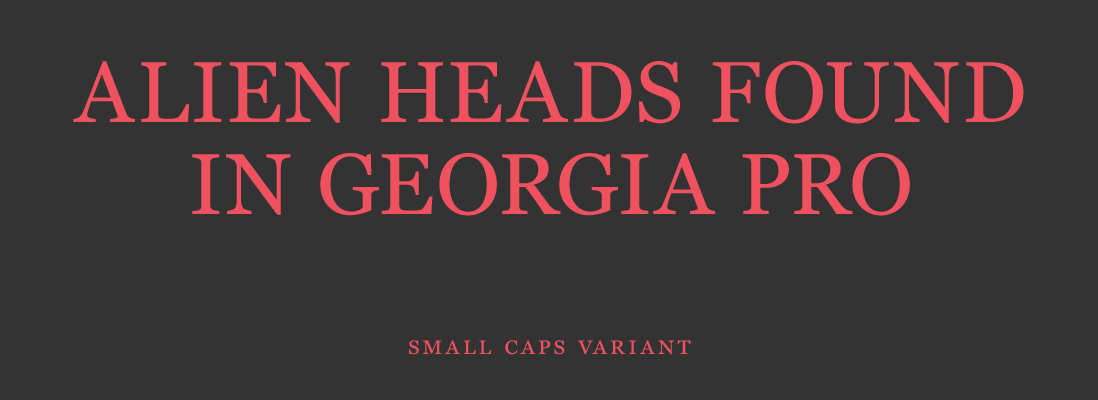
<style>
.page{position:relative;width:1098px;height:400px;background:#333333}
.page>*{position:absolute;margin:0}
.t1{font:86.3px/91.7px "GeorgiaPro-Regular";letter-spacing:0.03em;color:#f0515f;text-transform:uppercase}
.t2{font:25.9px "GeorgiaPro-Regular";letter-spacing:0.11em;color:#f0515f;font-variant:small-caps}
</style>
<div class="page">
<p class="t1" style="left:73px;top:61px;width:951px;height:155px;text-align:center">Alien heads found<br>in Georgia Pro</p>
<p class="t2" style="left:409px;top:340px;width:282px;height:15px">small caps variant</p>
</div>
